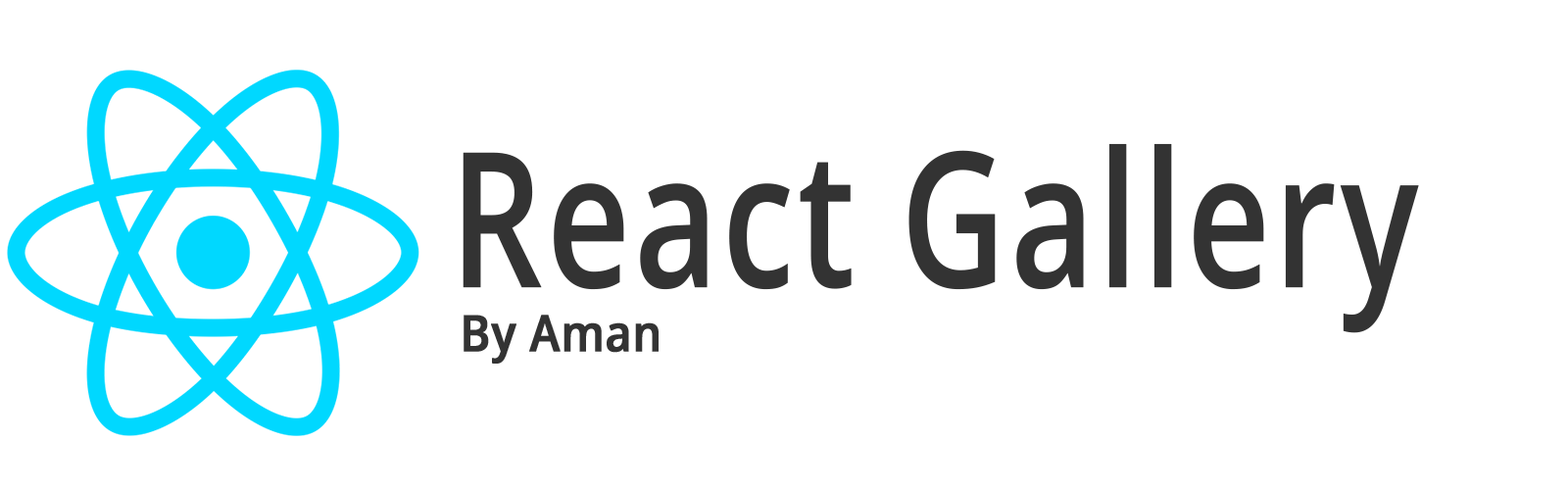
<style>
.page{position:relative;width:1568px;height:490px;background:#ffffff}
.page>*{position:absolute;margin:0}
.t1{font:188px "OpenSans-Semibold";color:#333333;font-weight:bold;scale:0.77 1}
.t2{font:50.3px "OpenSans-Semibold";color:#333333;font-weight:bold;scale:0.9 1}
</style>
<div class="page">
<p class="t1" style="left:463px;top:143px;width:956px;height:190px">React Gallery</p>
<p class="t2" style="left:464px;top:315px;width:195px;height:49px">By Aman</p>
</div>
